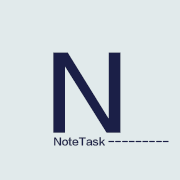
<style>
.page{position:relative;width:180px;height:180px;background:#e1eaeb}
.page>*{position:absolute;margin:0}
.t1{font:100px "FZLTZHK--GBK1-0";color:#1b1f47}
.t2{font:10px "FZLTZHK--GBK1-0";color:#1b1f47}
</style>
<div class="page">
<p class="t1" style="left:53px;top:52px;width:68px;height:81px">N</p>
<p class="t2" style="left:54px;top:137px;width:115px;height:9px">NoteTask ---------</p>
</div>
